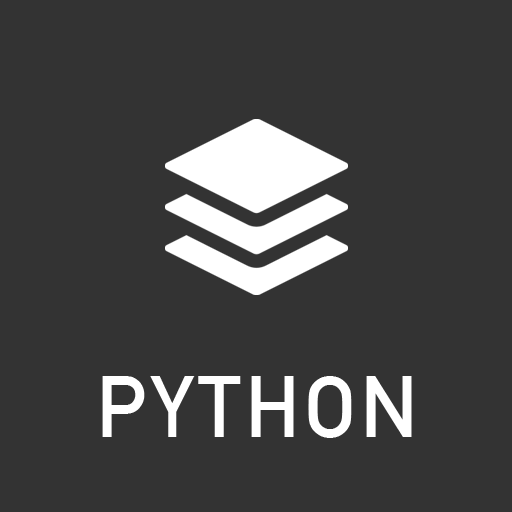
<style>
.page{position:relative;width:512px;height:512px;background:#333333}
.page>*{position:absolute;margin:0}
.t1{font:85.1px "DINAlternate-Bold";letter-spacing:0.05em;color:#ffffff}
</style>
<div class="page">
<p class="t1" style="left:102px;top:376px;width:310px;height:62px">PYTHON</p>
</div>
